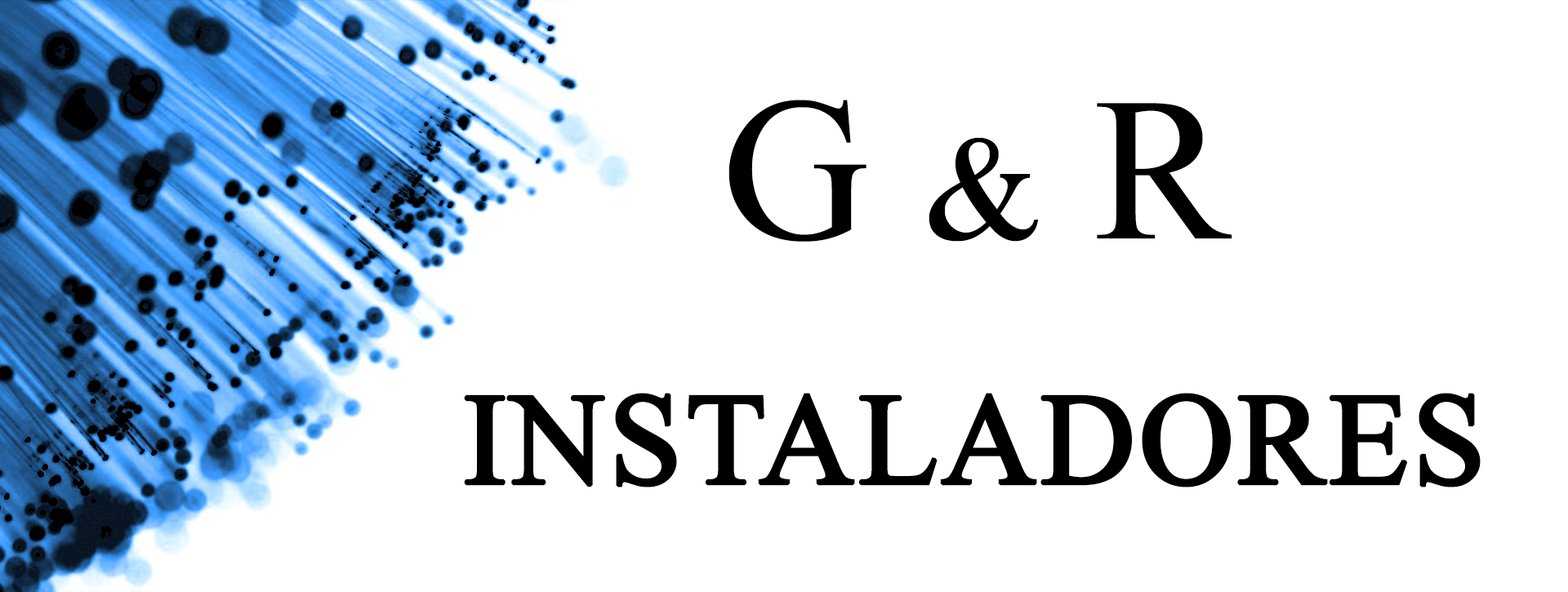
<style>
.page{position:relative;width:1568px;height:592px;background:#ffffff}
.page>*{position:absolute;margin:0}
.t1{font:130.7px/245px "TimesNewRomanPSMT";letter-spacing:0.005em;color:#000000;font-weight:bold}
.t2{font:204.2px/245px "TimesNewRomanPSMT";letter-spacing:0.005em;color:#000000;font-variant:small-caps}
</style>
<div class="page">
<p class="t1" style="left:464px;top:100px;width:1017px;height:388px;text-align:center"><span class="t2">G &amp; R<br></span>INSTALADORES</p>
</div>
